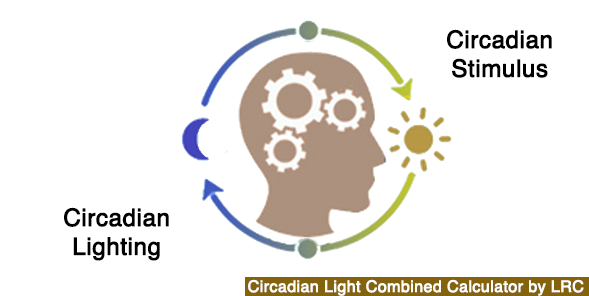
<style>
.page{position:relative;width:589px;height:296px;background:#ffffff}
.page>*{position:absolute;margin:0}
.t1{font:24px "Helvetica";color:#000000;font-weight:bold}
.t2{font:16px "Helvetica";color:#ffffff;font-weight:bold}
</style>
<div class="page">
<p class="t1" style="left:447px;top:29px;width:105px;height:49px;text-align:center">Circadian<br>Stimulus</p>
<p class="t1" style="left:64px;top:207px;width:105px;height:54px;text-align:center">Circadian<br>Lighting</p>
<p class="t2" style="left:248px;top:279px;width:336px;height:17px">Circadian Light Combined Calculator by LRC</p>
</div>
